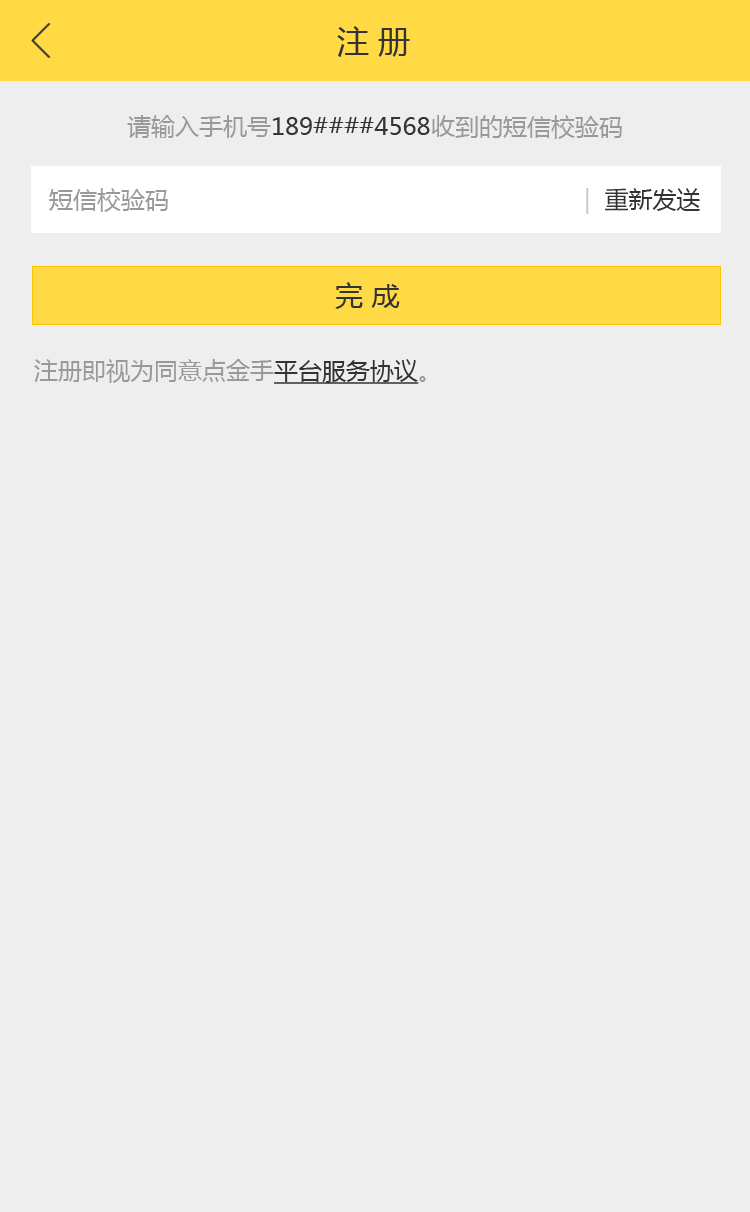
<style>
.page{position:relative;width:750px;height:1212px;background:#eeeeee}
.page>*{position:absolute;margin:0}
.t1{font:32px "MicrosoftYaHei";color:#333333}
.t2{font:24px "MicrosoftYaHei";color:#333333}
.t3{font:24px "MicrosoftYaHei";color:#999999}
.t4{font:24px "MicrosoftYaHei";color:#cacaca}
.t5{font:28px "MicrosoftYaHei";color:#333333}
.t6{font:24px "MicrosoftYaHei";color:#333333;text-decoration:underline}
</style>
<div class="page">
<p class="t1" style="left:337px;top:26px;width:73px;height:31px">注 册</p>
<p class="t2" style="left:127px;top:115px;width:495px;height:24px"><span class="t3">请输入手机号</span>189####4568<span class="t3">收到的短信校验码</span></p>
<p class="t3" style="left:49px;top:188px;width:119px;height:24px">短信校验码</p>
<p class="t2" style="left:586px;top:188px;width:114px;height:26px"><span class="t4">|  </span>重新发送</p>
<p class="t5" style="left:335px;top:282px;width:65px;height:27px">完 成</p>
<p class="t3" style="left:34px;top:359px;width:392px;height:25px">注册即视为同意点金手<span class="t6">平台服务协议</span>。</p>
</div>
